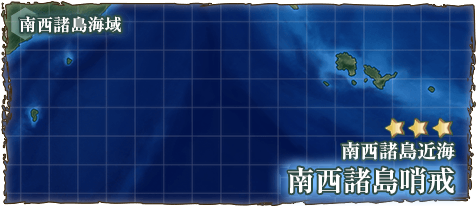
<style>
.page{position:relative;width:476px;height:206px}
.page>*{position:absolute;margin:0}
.t1{font:17px "RyuminPr6N-ExBold";color:#ffffff}
.t2{font:19px "RyuminPro-ExBold";color:#ffffff}
.t3{font:28px "RyuminPro-ExBold";color:#ffffff}
</style>
<div class="page">
<p class="t1" style="left:19px;top:16px;width:102px;height:17px">南西諸島海域</p>
<p class="t2" style="left:341px;top:141px;width:114px;height:19px">南西諸島近海</p>
<p class="t3" style="left:288px;top:167px;width:166px;height:27px">南西諸島哨戒</p>
</div>
